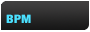
<style>
.page{position:relative;width:90px;height:32px}
.page>*{position:absolute;margin:0}
.t1{font:11px "HelveticaLTStd-BlkCond";color:#4ce1ff;scale:1.2 1}
</style>
<div class="page">
<p class="t1" style="left:6px;top:14px;width:25px;height:9px">BPM</p>
</div>
